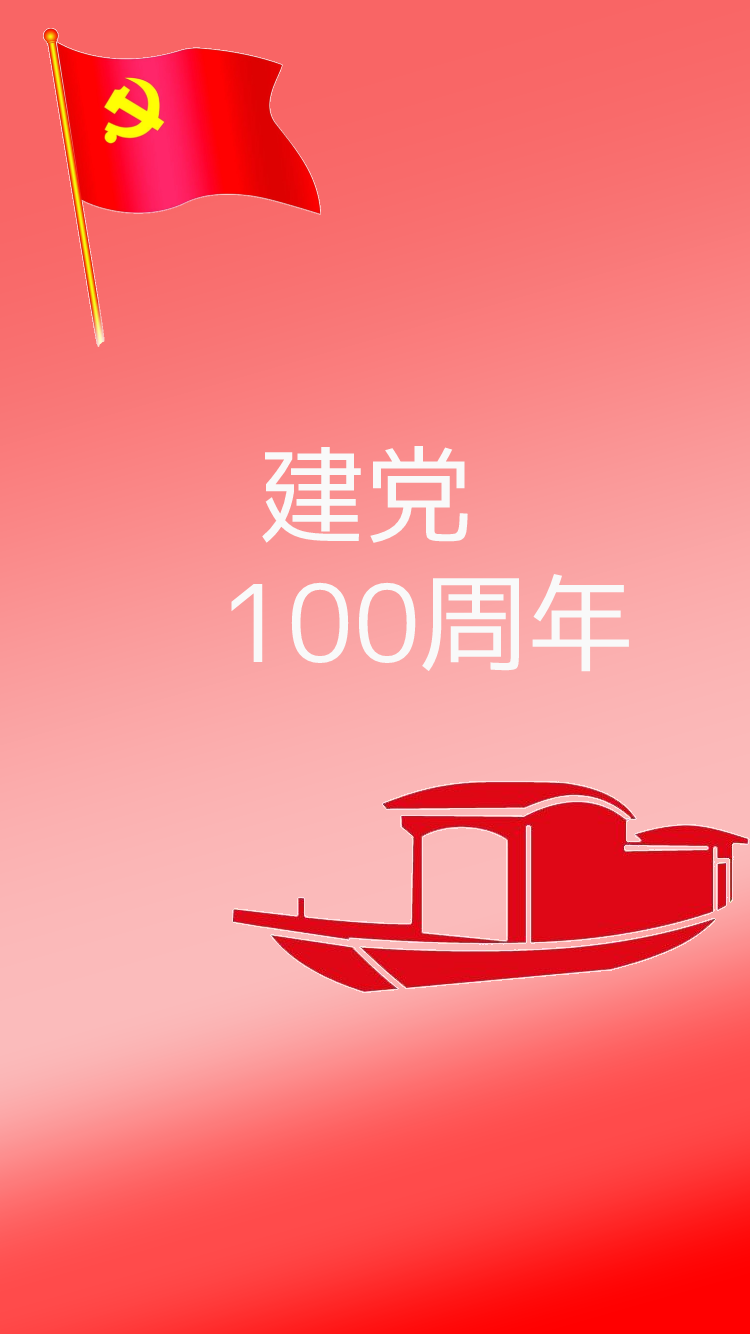
<style>
.page{position:relative;width:750px;height:1334px}
.page>*{position:absolute;margin:0}
.t1{font:107px "mplus-1c-regular";color:#f9f9f9}
.t2{font:107px "mplus-1c-regular";color:#000000}
</style>
<div class="page">
<p class="t1" style="left:231px;top:446px;width:398px;height:226px"><span class="t2"> </span>建党<br>100周年</p>
</div>
